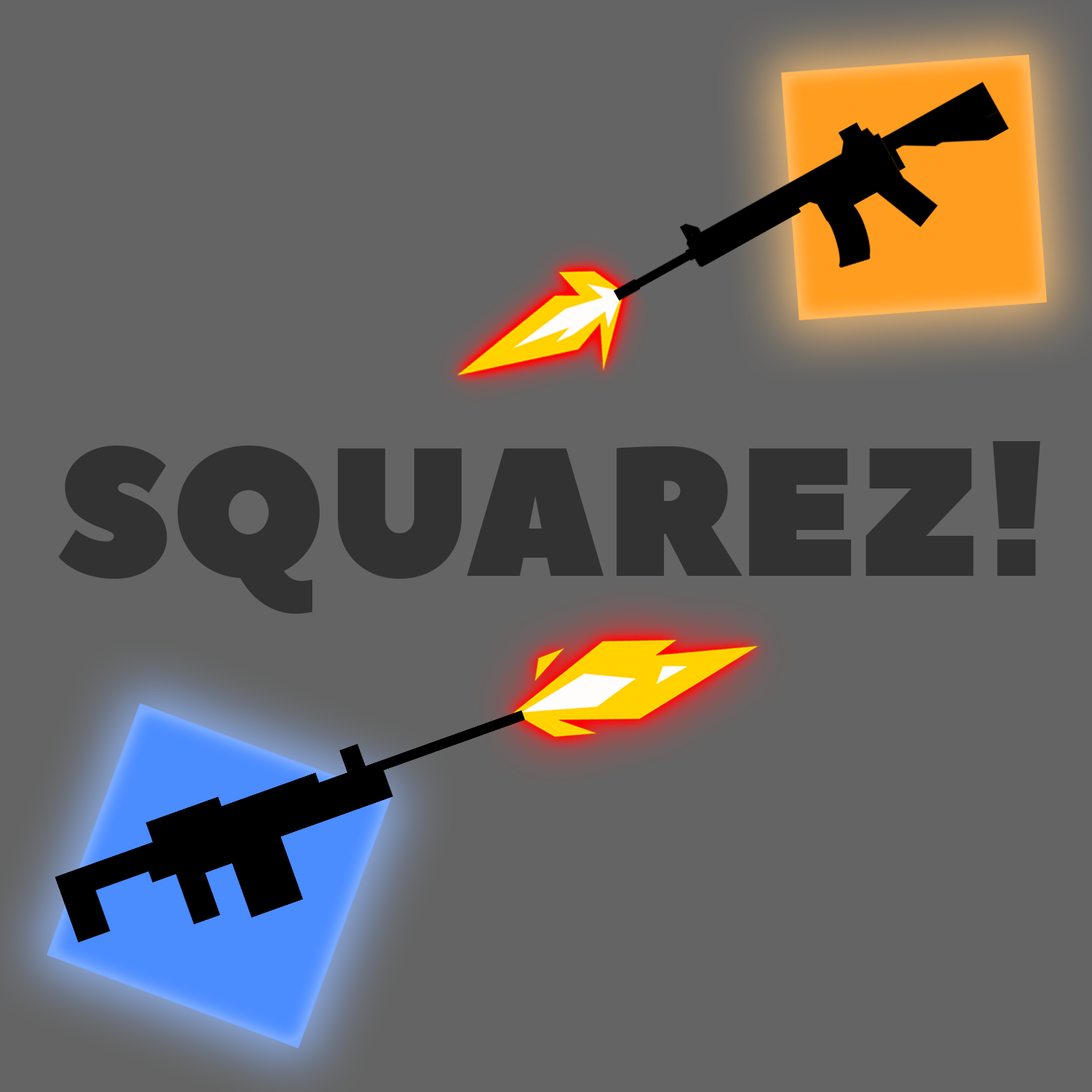
<style>
.page{position:relative;width:1092px;height:1092px;background:#646464}
.page>*{position:absolute;margin:0}
.t1{font:182px "PeaceSans";color:#323232}
</style>
<div class="page">
<p class="t1" style="left:58px;top:441px;width:982px;height:173px">SQUAREZ!</p>
</div>
